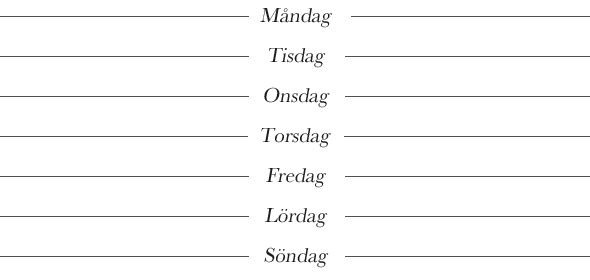
<style>
.page{position:relative;width:590px;height:280px;background:#ffffff}
.page>*{position:absolute;margin:0}
.t1{font:21px "Baskerville";color:#1e1e1e;font-style:italic}
</style>
<div class="page">
<p class="t1" style="left:260px;top:8px;width:72px;height:20px">Måndag</p>
<p class="t1" style="left:269px;top:48px;width:57px;height:20px">Tisdag</p>
<p class="t1" style="left:264px;top:87px;width:66px;height:21px">Onsdag</p>
<p class="t1" style="left:261px;top:128px;width:70px;height:20px">Torsdag</p>
<p class="t1" style="left:266px;top:168px;width:60px;height:20px">Fredag</p>
<p class="t1" style="left:264px;top:208px;width:64px;height:20px">Lördag</p>
<p class="t1" style="left:264px;top:247px;width:65px;height:21px">Söndag</p>
</div>
